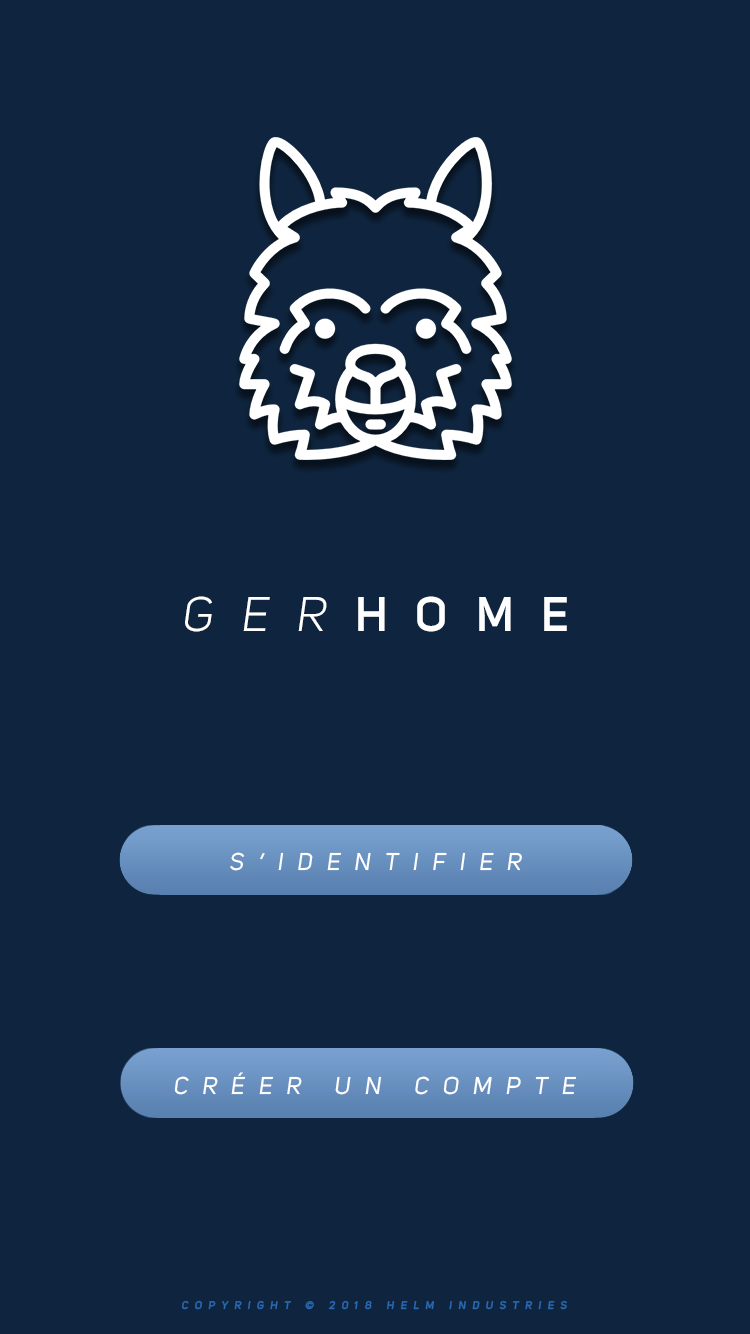
<style>
.page{position:relative;width:750px;height:1334px;background:#0f253f}
.page>*{position:absolute;margin:0}
.t1{font:48px "UniSansSemiBold";letter-spacing:0.585em;color:#ffffff;text-transform:uppercase}
.t2{font:48px "UniSansBookItalic";letter-spacing:0.585em;color:#ffffff;text-transform:uppercase}
.t3{font:24px "UniSansRegularItalic";letter-spacing:0.585em;color:#ffffff;text-transform:uppercase}
.t4{font:11px "UniSansSemiBoldItalic";letter-spacing:0.585em;color:#2a69b4;text-transform:uppercase}
</style>
<div class="page">
<p class="t1" style="left:185px;top:596px;width:382px;height:36px"><span class="t2">Ger</span>home</p>
<p class="t3" style="left:230px;top:852px;width:292px;height:19px">S’identifier</p>
<p class="t3" style="left:174px;top:1072px;width:403px;height:23px">Créer un compte</p>
<p class="t4" style="left:182px;top:1300px;width:385px;height:10px">Copyright © 2018 helm industries</p>
</div>
